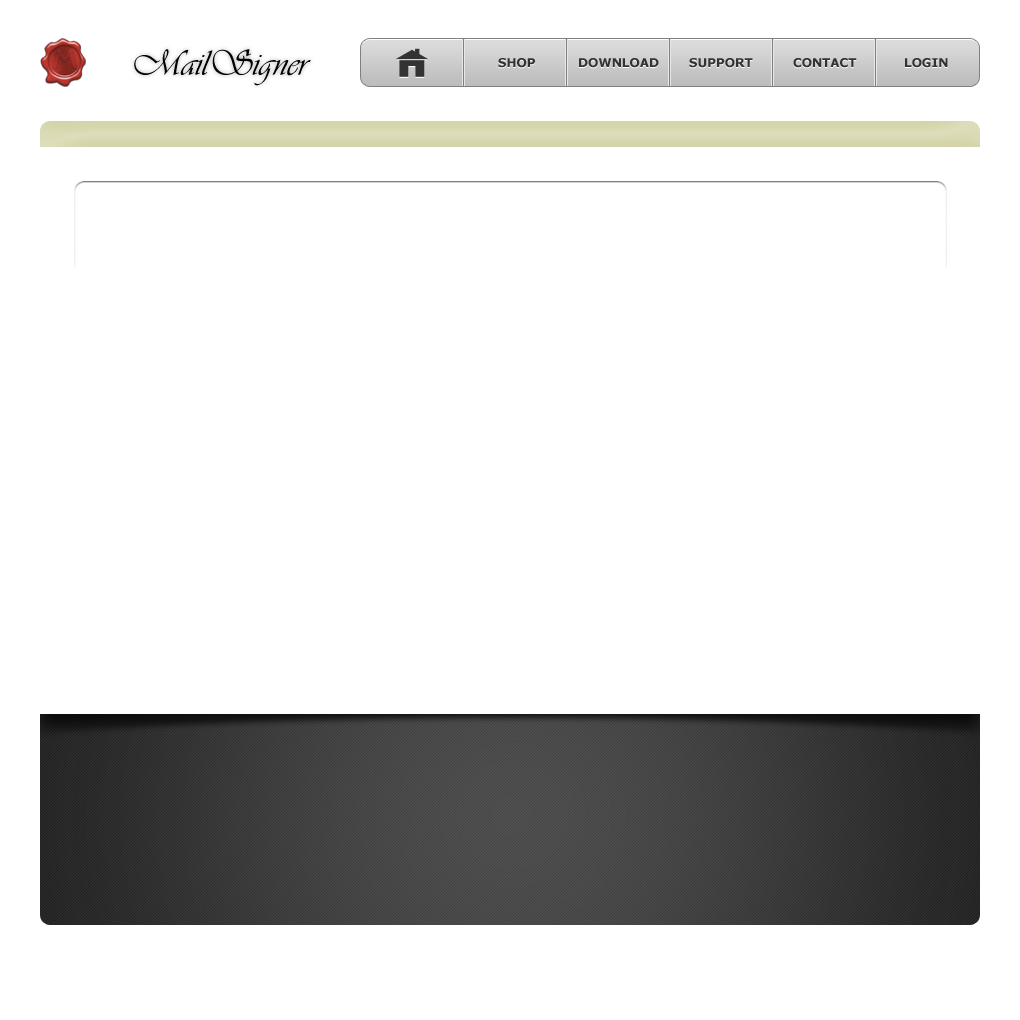
<style>
.page{position:relative;width:1020px;height:1020px;background:#ffffff}
.page>*{position:absolute;margin:0}
.t1{font:37px "Vivaldii";color:#000000}
.t2{font:12px "Verdana-Bold";color:#333333}
</style>
<div class="page">
<p class="t1" style="left:134px;top:49px;width:177px;height:37px">MailSigner</p>
<p class="t2" style="left:498px;top:58px;width:37px;height:10px">SHOP</p>
<p class="t2" style="left:579px;top:58px;width:80px;height:10px">DOWNLOAD</p>
<p class="t2" style="left:689px;top:58px;width:64px;height:10px">SUPPORT</p>
<p class="t2" style="left:793px;top:58px;width:64px;height:10px">CONTACT</p>
<p class="t2" style="left:905px;top:58px;width:43px;height:10px">LOGIN</p>
</div>
